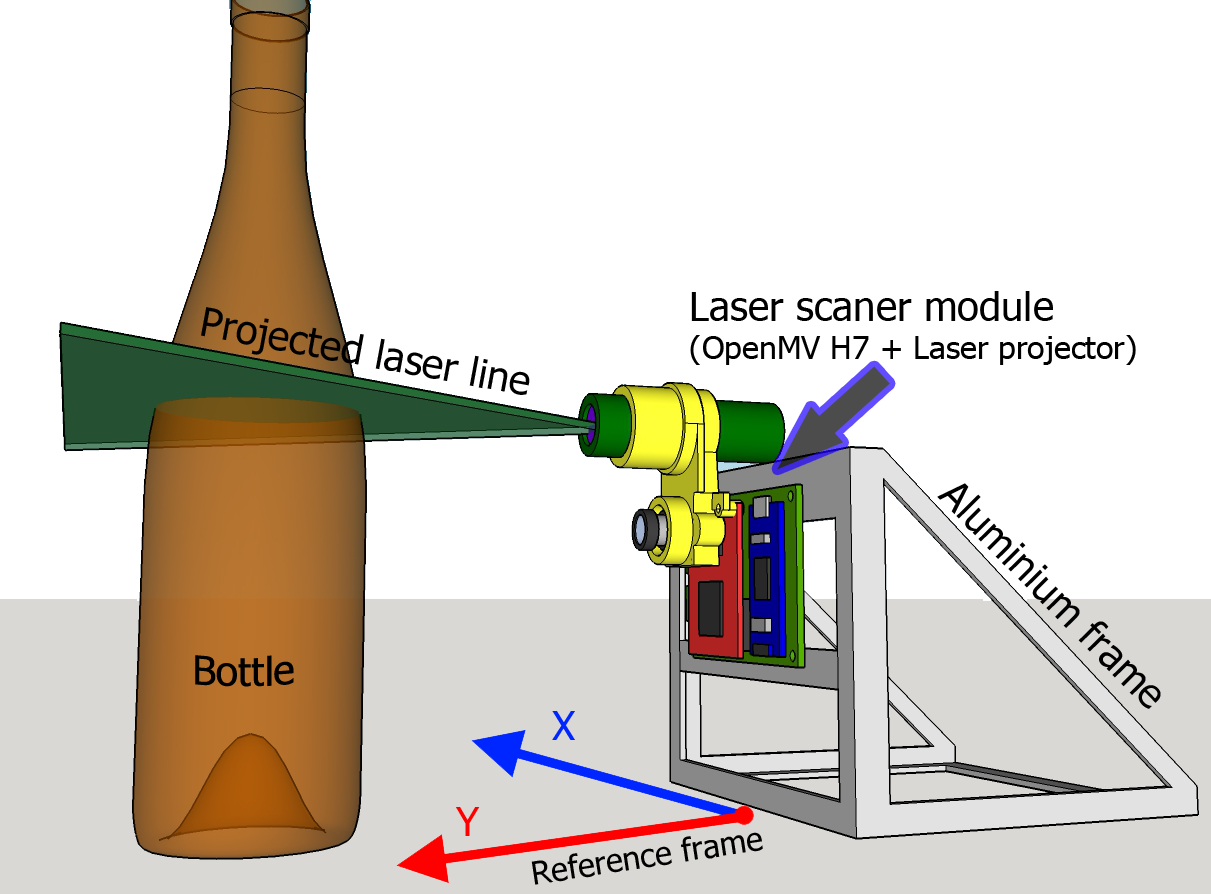
<style>
.page{position:relative;width:1211px;height:894px;background:#ffffff}
.page>*{position:absolute;margin:0}
.t1{font:32px "Tahoma";color:#000000}
.t2{font:40px "Tahoma";color:#000000}
.t3{font:40px "Tahoma";color:#0026ff}
.t4{font:40px "Tahoma";color:#ff0000}
</style>
<div class="page">
<p class="t1" style="left:690px;top:291px;width:446px;height:74px"><span class="t2">Laser scaner module<br></span>(OpenMV H7 + Laser projector)</p>
<p class="t2" style="left:201px;top:307px;width:329px;height:88px;rotate:10deg">Projected laser line</p>
<p class="t2" style="left:937px;top:483px;width:224px;height:226px;rotate:45deg">Aluminium frame</p>
<p class="t2" style="left:195px;top:655px;width:99px;height:32px">Bottle</p>
<p class="t3" style="left:552px;top:711px;width:23px;height:29px">X</p>
<p class="t4" style="left:456px;top:807px;width:24px;height:29px">Y</p>
<p class="t1" style="left:531px;top:832px;width:232px;height:53px;rotate:-9deg">Reference frame</p>
</div>
